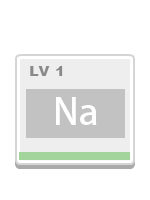
<style>
.page{position:relative;width:150px;height:200px;background:#ffffff}
.page>*{position:absolute;margin:0}
.t1{font:14px "Arial-Black";letter-spacing:0.025em;color:#898989}
.t2{font:36px "AdobeHeitiStd-Regular";letter-spacing:0.025em;color:#ffffff}
</style>
<div class="page">
<p class="t1" style="left:30px;top:66px;width:33px;height:10px">LV 1</p>
<p class="t2" style="left:56px;top:97px;width:41px;height:28px">Na</p>
</div>
